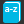
<style>
.page{position:relative;width:24px;height:24px;background:#00b8e4}
.page>*{position:absolute;margin:0}
.t1{font:10px "MyriadPro-Regular";color:#ffffff}
</style>
<div class="page">
<p class="t1" style="left:5px;top:7px;width:13px;height:5px">a-z</p>
</div>
